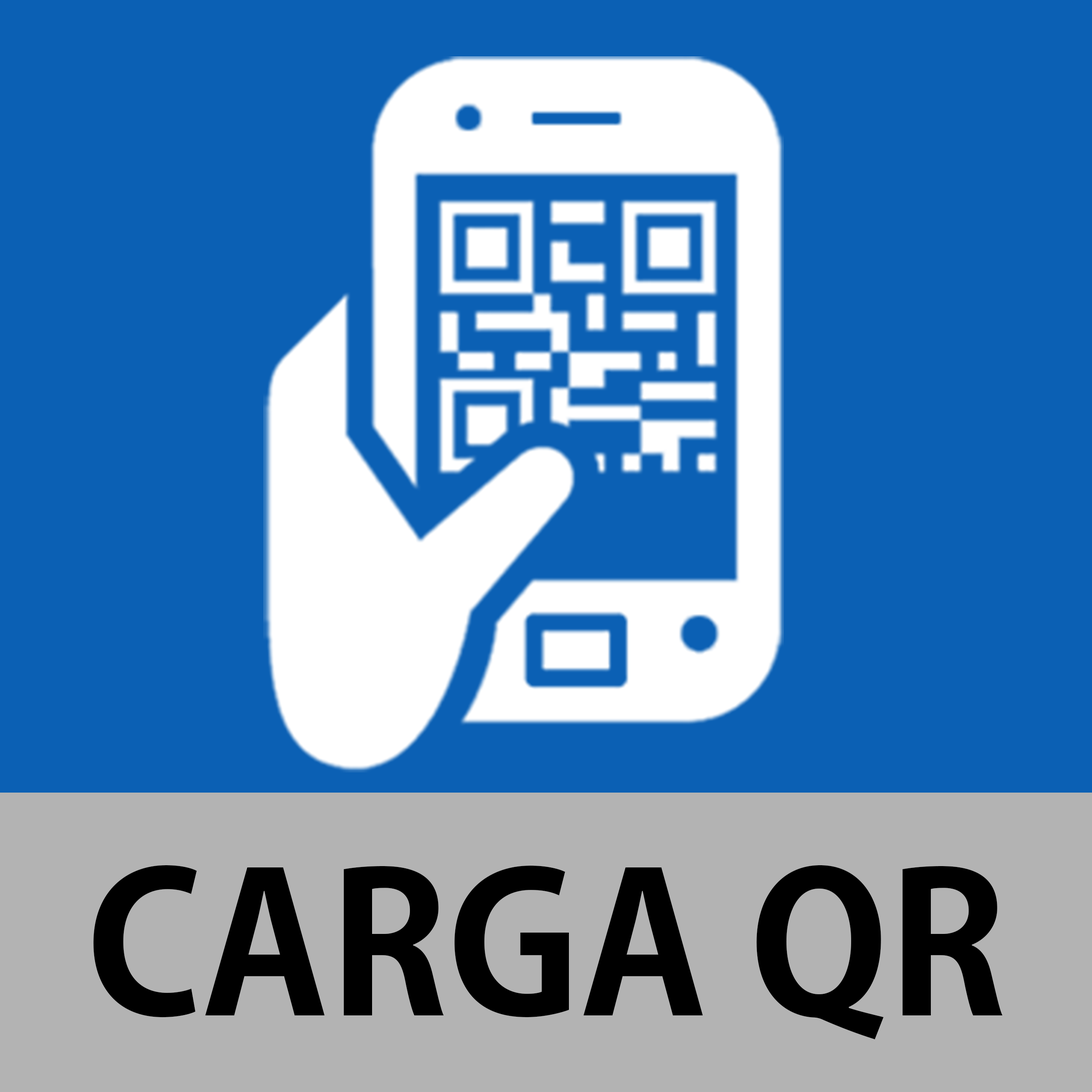
<style>
.page{position:relative;width:1092px;height:1092px;background:#0b60b4}
.page>*{position:absolute;margin:0}
.t1{font:192.6px "KozGoPr6N-Bold";color:#000000}
</style>
<div class="page">
<p class="t1" style="left:93px;top:865px;width:910px;height:175px">CARGA QR</p>
</div>
